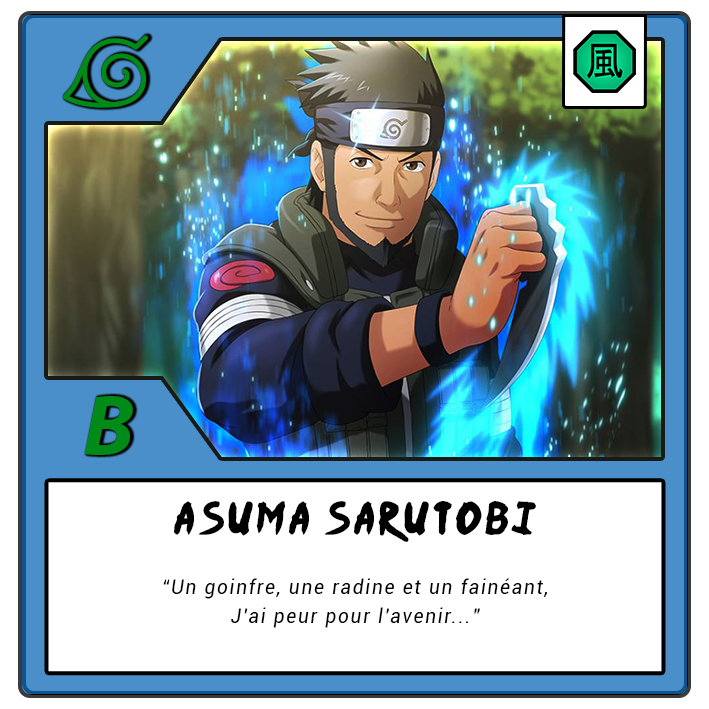
<style>
.page{position:relative;width:709px;height:709px;background:#ffffff}
.page>*{position:absolute;margin:0}
.t1{font:87.5px "MyriadPro-BoldIt";letter-spacing:-0.12em;color:#008a17}
.t2{font:37.5px "Ninja-Naruto";letter-spacing:0.1em;color:#000000}
.t3{font:20.8px/29.2px "Roboto-Italic";letter-spacing:0.1em;color:#000000;scale:0.9 1}
</style>
<div class="page">
<p class="t1" style="left:85px;top:396px;width:48px;height:59px">B</p>
<p class="t2" style="left:174px;top:501px;width:362px;height:41px">Asuma Sarutobi</p>
<p class="t3" style="left:163px;top:578px;width:384px;height:50px;text-align:center">“Un goinfre, une radine et un fainéant,<br>J'ai peur pour l'avenir...”</p>
</div>
